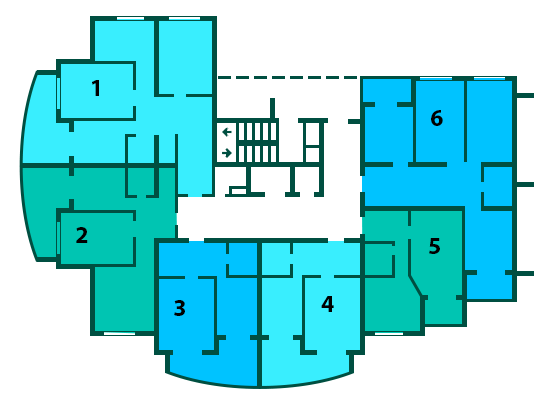
<style>
.page{position:relative;width:534px;height:413px;background:#ffffff}
.page>*{position:absolute;margin:0}
.t1{font:24px "MyriadPro-Bold";color:#000000;text-transform:uppercase}
</style>
<div class="page">
<p class="t1" style="left:92px;top:80px;width:7px;height:16px">1</p>
<p class="t1" style="left:431px;top:110px;width:12px;height:16px">6</p>
<p class="t1" style="left:76px;top:227px;width:12px;height:16px">2</p>
<p class="t1" style="left:429px;top:238px;width:11px;height:16px">5</p>
<p class="t1" style="left:174px;top:300px;width:11px;height:16px">3</p>
<p class="t1" style="left:321px;top:296px;width:13px;height:16px">4</p>
</div>
